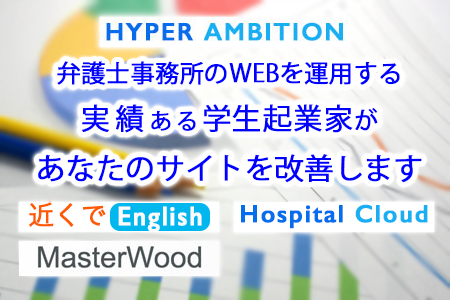
<style>
.page{position:relative;width:450px;height:300px}
.page>*{position:absolute;margin:0}
.t1{font:24px "KozGoPr6N-Regular";color:#0000ff;font-weight:bold}
.t2{font:29px "KozGoPr6N-Regular";letter-spacing:0.16em;color:#0000ff;font-weight:bold}
.t3{font:22px "KozGoPr6N-Regular";letter-spacing:0.16em;color:#0000ff;font-weight:bold}
.t4{font:29px "KozGoPr6N-Regular";letter-spacing:0.02em;color:#0000ff;font-weight:bold}
.t5{font:29px "KozGoPr6N-Regular";color:#0000ff;font-weight:bold}
</style>
<div class="page">
<p class="t1" style="left:38px;top:61px;width:384px;height:122px;text-align:center">弁護士事務所のWEBを運用する<br><span class="t2">実績</span><span class="t3">ある</span><span class="t4">学生起業家</span>が<br><span class="t5">あなたのサイトを改善します</span></p>
</div>
